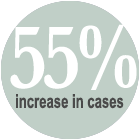
<style>
.page{position:relative;width:140px;height:140px;background:#c0cfc7}
.page>*{position:absolute;margin:0}
.t1{font:93.6px "Baskerville-SemiBold";letter-spacing:-0.075em;color:#ffffff;scale:0.85 1}
.t2{font:19.2px "ArialNarrow-Bold";color:#4a4a4a;scale:0.83 1}
</style>
<div class="page">
<p class="t1" style="left:10px;top:24px;width:127px;height:66px">55%</p>
<p class="t2" style="left:16px;top:94px;width:108px;height:15px">increase in cases</p>
</div>
